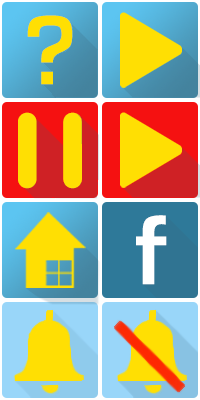
<style>
.page{position:relative;width:200px;height:400px}
.page>*{position:absolute;margin:0}
.t1{font:102px "EurostileBold";color:#ffdf03}
.t2{font:86px "VAL";color:#ffdf03}
.t3{font:102px "EurostileBold";color:#ffffff}
</style>
<div class="page">
<p class="t1" style="left:27px;top:15px;width:46px;height:70px">?</p>
<p class="t2" style="left:18px;top:112px;width:64px;height:77px">| |</p>
<p class="t3" style="left:136px;top:215px;width:31px;height:70px">f</p>
</div>
